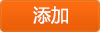
<style>
.page{position:relative;width:100px;height:32px}
.page>*{position:absolute;margin:0}
.t1{font:18px "MicrosoftYaHei";color:#ffffff}
</style>
<div class="page">
<p class="t1" style="left:33px;top:6px;width:35px;height:18px">添加</p>
</div>
